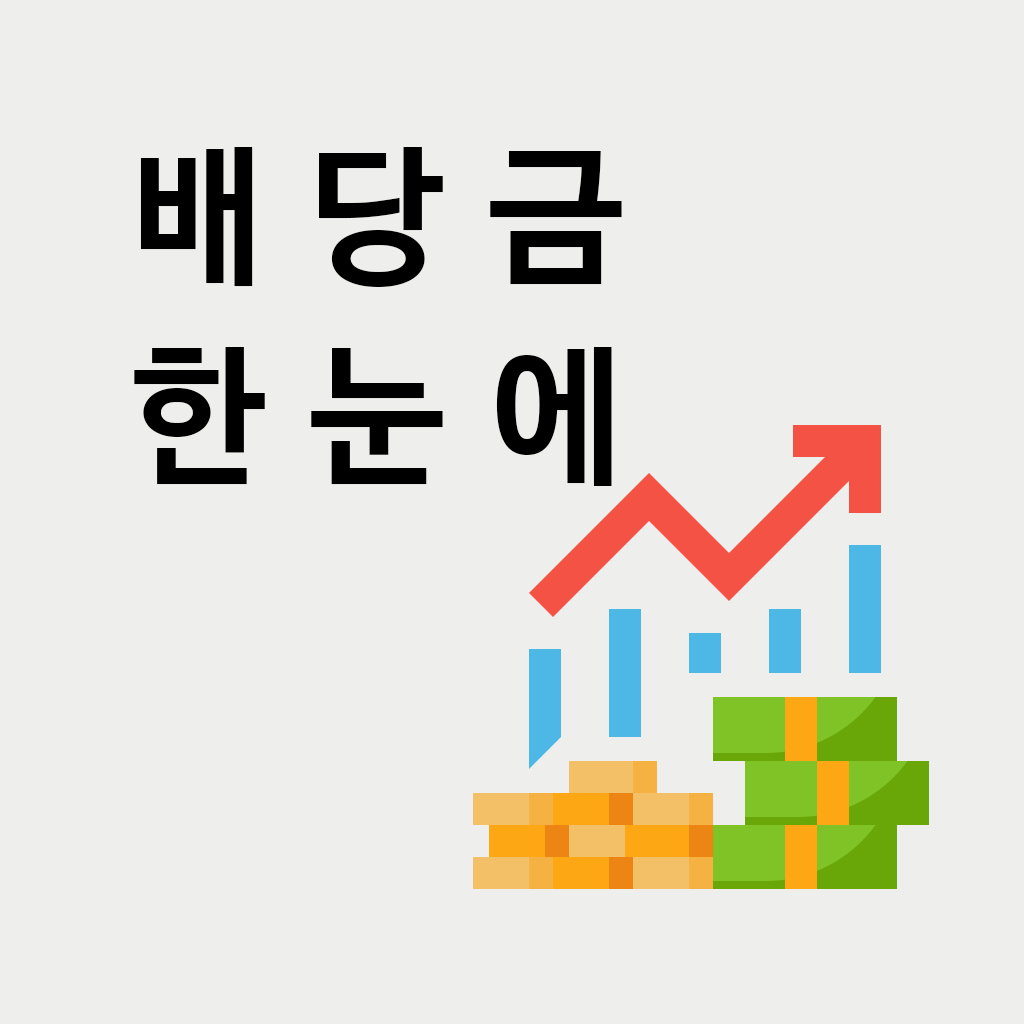
<style>
.page{position:relative;width:1024px;height:1024px;background:#eeeeec}
.page>*{position:absolute;margin:0}
.t1{font:150px/200px "NanumBarunGothicBold";letter-spacing:0.3em;color:#000000}
</style>
<div class="page">
<p class="t1" style="left:134px;top:147px;width:488px;height:339px">배당금<br>한눈에</p>
</div>
